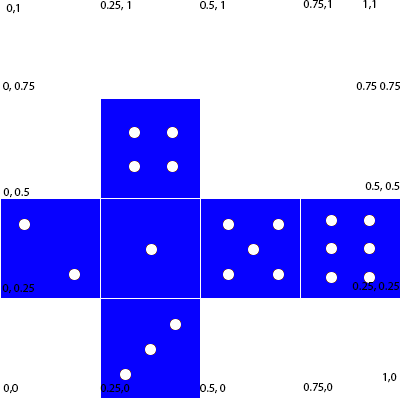
<style>
.page{position:relative;width:400px;height:400px;background:#ffffff}
.page>*{position:absolute;margin:0}
.t1{font:12px "MyriadPro-Regular";color:#000000}
</style>
<div class="page">
<p class="t1" style="left:6px;top:4px;width:13px;height:10px">0,1</p>
<p class="t1" style="left:100px;top:1px;width:31px;height:10px">0.25, 1</p>
<p class="t1" style="left:200px;top:1px;width:24px;height:10px">0.5, 1</p>
<p class="t1" style="left:303px;top:0px;width:28px;height:10px">0.75,1</p>
<p class="t1" style="left:363px;top:0px;width:13px;height:10px">1,1</p>
<p class="t1" style="left:3px;top:82px;width:32px;height:10px">0, 0.75</p>
<p class="t1" style="left:356px;top:82px;width:44px;height:8px">0.75 0.75</p>
<p class="t1" style="left:365px;top:182px;width:35px;height:10px">0.5, 0.5</p>
<p class="t1" style="left:3px;top:188px;width:26px;height:10px">0, 0.5</p>
<p class="t1" style="left:2px;top:284px;width:32px;height:10px">0, 0.25</p>
<p class="t1" style="left:352px;top:282px;width:47px;height:10px">0.25, 0.25</p>
<p class="t1" style="left:383px;top:373px;width:14px;height:10px">1,0</p>
<p class="t1" style="left:3px;top:384px;width:15px;height:10px">0,0</p>
<p class="t1" style="left:100px;top:384px;width:30px;height:10px">0.25,0</p>
<p class="t1" style="left:200px;top:384px;width:26px;height:10px">0.5, 0</p>
<p class="t1" style="left:303px;top:383px;width:30px;height:10px">0.75,0</p>
</div>
